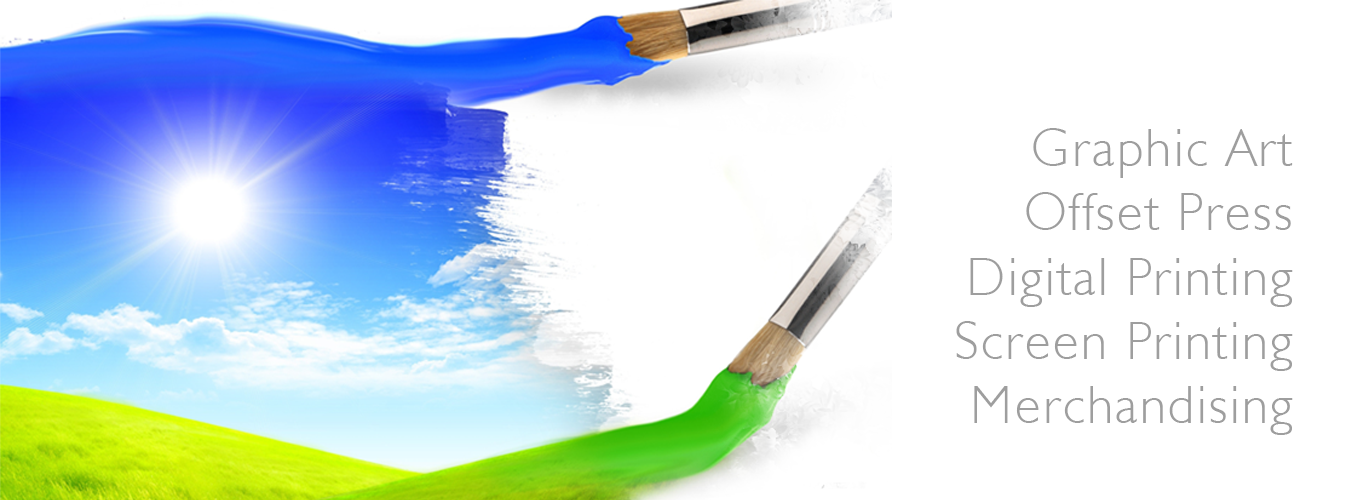
<style>
.page{position:relative;width:1366px;height:500px;background:#ffffff}
.page>*{position:absolute;margin:0}
.t1{font:53.6px/64.3px "Humanist521BT-Light";letter-spacing:0.045em;color:#9e9e9e}
</style>
<div class="page">
<p class="t1" style="left:956px;top:128px;width:337px;height:307px;text-align:right">Graphic Art<br>Offset Press<br>Digital Printing<br>Screen Printing<br>Merchandising</p>
</div>
